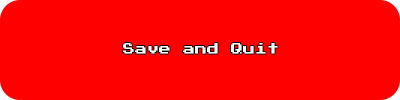
<style>
.page{position:relative;width:400px;height:100px;background:#ff0000}
.page>*{position:absolute;margin:0}
.t1{font:12px "PressStart2P";color:#ffffff}
</style>
<div class="page">
<p class="t1" style="left:123px;top:43px;width:155px;height:11px">Save and Quit</p>
</div>
